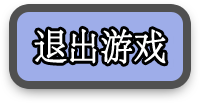
<style>
.page{position:relative;width:200px;height:103px;background:#9eade9}
.page>*{position:absolute;margin:0}
.t1{font:35.8px "AdobeSongStd-Light";color:#ffffff;font-weight:bold;scale:0.9 1}
</style>
<div class="page">
<p class="t1" style="left:34px;top:28px;width:132px;height:36px">退出游戏</p>
</div>
